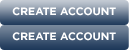
<style>
.page{position:relative;width:129px;height:50px}
.page>*{position:absolute;margin:0}
.t1{font:10.7px "Gotham-Bold";color:#ffffff}
</style>
<div class="page">
<p class="t1" style="left:12px;top:7px;width:104px;height:9px">CREATE ACCOUNT</p>
<p class="t1" style="left:12px;top:32px;width:104px;height:9px">CREATE ACCOUNT</p>
</div>
